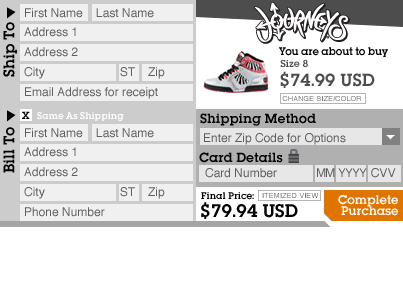
<style>
.page{position:relative;width:403px;height:298px;background:#ffffff}
.page>*{position:absolute;margin:0}
.t1{font:12px/19.7px "Helvetica";color:#606060}
.t2{font:16px "LubalinGraphITC-Demi";color:#000000}
.t3{font:11.5px "LubalinGraphITC-Demi";letter-spacing:-0.02em;color:#000000}
.t4{font:10.5px "LubalinGraphITC-Demi";color:#4c4c4c}
.t5{font:18.5px "LubalinGraphITC-Demi";color:#4c4c4c}
.t6{font:7px "Helvetica";letter-spacing:0.04em;text-transform:uppercase}
.t7{font:11px "LubalinGraphITC-Demi";color:#000000}
.t8{font:10px "LubalinGraphITC-Demi";color:#ffffff}
.t9{font:14px "LubalinGraphITC-Demi";color:#000000}
.t10{font:12px "Helvetica";color:#5c5c5c}
.t11{font:12px "Helvetica";letter-spacing:-0.08em;color:#5c5c5c}
.t12{font:12px "Helvetica";letter-spacing:0.02em;color:#5c5c5c}
.t13{font:10px "LubalinGraphITC-Demi";color:#000000}
.t14{font:7px "Helvetica";letter-spacing:0.04em;color:#555555;text-transform:uppercase}
.t15{font:13px "LubalinGraphITC-Demi";color:#ffffff}
.t16{font:19px "LubalinGraphITC-Demi";color:#000000}
</style>
<div class="page">
<p class="t1" style="left:24px;top:8px;width:141px;height:91px">First Name    Last Name<br>Address 1<br>Address 2<br>City        ST    Zip<br>Email Address for receipt</p>
<p class="t2" style="left:3px;top:22px;width:14px;height:55px;rotate:-90deg">Ship To</p>
<p class="t3" style="left:279px;top:47px;width:109px;height:10px">You are about to buy</p>
<p class="t4" style="left:280px;top:59px;width:28px;height:9px">Size 8</p>
<p class="t5" style="left:280px;top:71px;width:95px;height:17px">$74.99 USD</p>
<p class="t6" style="left:282px;top:96px;width:79px;height:5px">change size/color</p>
<p class="t7" style="left:22px;top:111px;width:8px;height:8px">X</p>
<p class="t8" style="left:37px;top:112px;width:87px;height:9px">Same As Shipping</p>
<p class="t9" style="left:200px;top:113px;width:116px;height:13px">Shipping Method</p>
<p class="t2" style="left:3px;top:127px;width:12px;height:46px;rotate:-90deg">Bill To</p>
<p class="t1" style="left:24px;top:128px;width:141px;height:89px">First Name    Last Name<br>Address 1<br>Address 2<br>City        ST    Zip<br>Phone Number</p>
<p class="t10" style="left:204px;top:133px;width:142px;height:12px">Enter Zip Code for Options</p>
<p class="t9" style="left:199px;top:152px;width:84px;height:11px">Card Details</p>
<p class="t10" style="left:205px;top:168px;width:191px;height:10px">Card Number            <span class="t11">MM YYYY  C</span><span class="t12">VV</span></p>
<p class="t13" style="left:201px;top:192px;width:53px;height:8px">Final Price:</p>
<p class="t14" style="left:262px;top:193px;width:56px;height:5px">itemized view</p>
<p class="t15" style="left:338px;top:195px;width:60px;height:21px">CompletePurchase</p>
<p class="t16" style="left:201px;top:202px;width:97px;height:17px">$79.94 USD</p>
</div>
